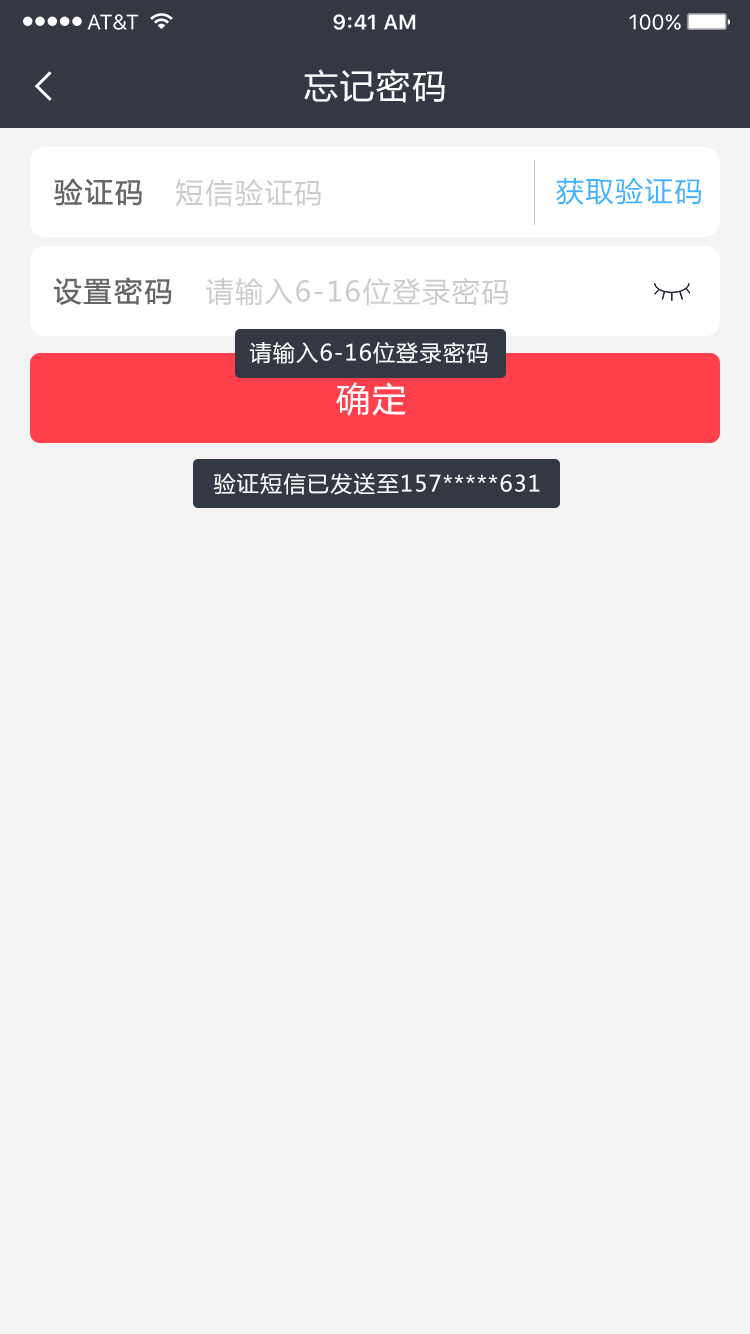
<style>
.page{position:relative;width:750px;height:1334px;background:#f4f4f4}
.page>*{position:absolute;margin:0}
.t1{font:34px "MicrosoftYaHei";letter-spacing:0.06em;color:#ffffff}
.t2{font:28px "MicrosoftYaHei";letter-spacing:0.06em;color:#666666;font-weight:bold}
.t3{font:28px "MicrosoftYaHei";letter-spacing:0.06em;color:#cccccc}
.t4{font:28px "MicrosoftYaHei";letter-spacing:0.06em;color:#3db4ff}
.t5{font:22px "MicrosoftYaHei";letter-spacing:0.06em;color:#ffffff}
</style>
<div class="page">
<p class="t1" style="left:304px;top:69px;width:141px;height:34px">忘记密码</p>
<p class="t2" style="left:54px;top:178px;width:88px;height:28px">验证码</p>
<p class="t3" style="left:175px;top:179px;width:146px;height:28px">短信验证码</p>
<p class="t4" style="left:556px;top:177px;width:145px;height:28px">获取验证码</p>
<p class="t2" style="left:53px;top:277px;width:119px;height:28px">设置密码</p>
<p class="t3" style="left:206px;top:278px;width:302px;height:28px">请输入6-16位登录密码</p>
<p class="t5" style="left:249px;top:342px;width:239px;height:22px">请输入6-16位登录密码</p>
<p class="t1" style="left:336px;top:382px;width:70px;height:34px">确定</p>
<p class="t5" style="left:213px;top:473px;width:327px;height:22px">验证短信已发送至157*****631</p>
</div>
